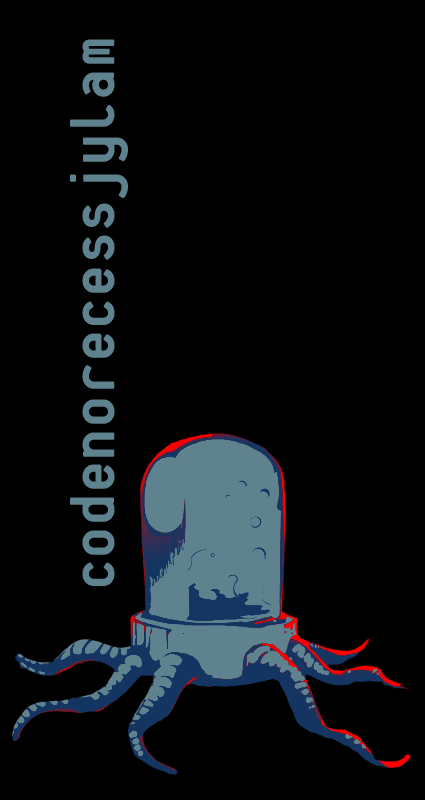
<style>
.page{position:relative;width:425px;height:800px;background:#000000}
.page>*{position:absolute;margin:0}
.t1{font:67.1px "PlateletHeavy";letter-spacing:0.025em;color:#5e838f}
</style>
<div class="page">
<p class="t1" style="left:70px;top:39px;width:58px;height:547px;rotate:-90deg">codenorecessjylam</p>
</div>
